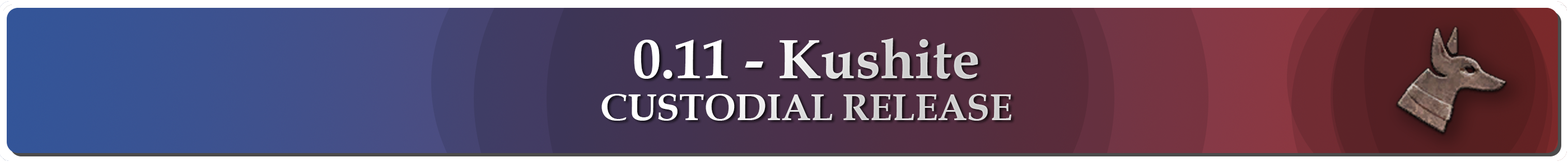
<style>
.page{position:relative;width:1568px;height:162px}
.page>*{position:absolute;margin:0}
.t1{font:37.3px/42px "BookAntiqua-Bold"}
.t2{font:56px "BookAntiqua-Bold"}
</style>
<div class="page">
<p class="t1" style="left:601px;top:38px;width:410px;height:83px;text-align:center"><span class="t2">0.11 - Kushite<br></span>CUSTODIAL RELEASE</p>
</div>
